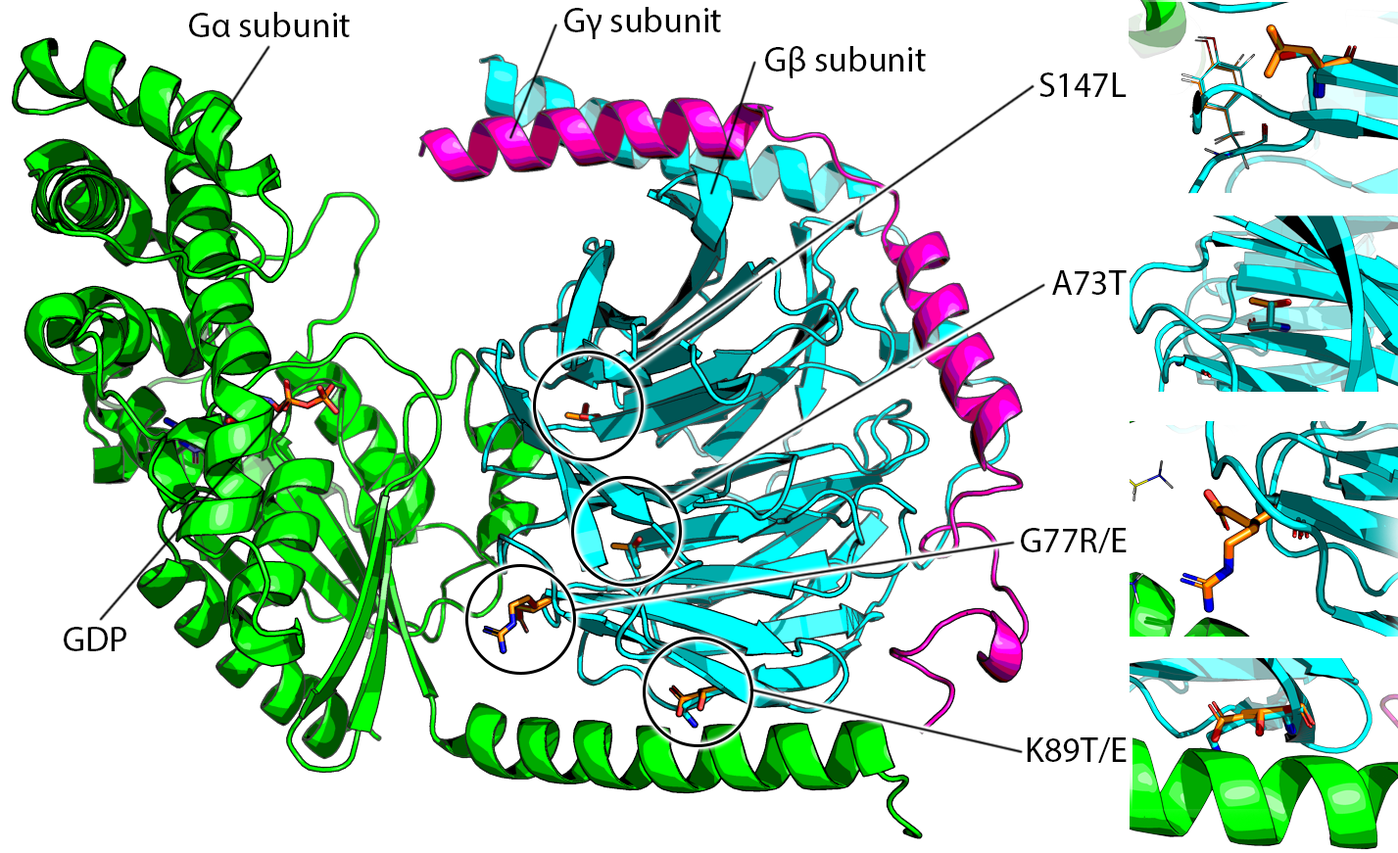
<style>
.page{position:relative;width:1398px;height:853px;background:#ffffff}
.page>*{position:absolute;margin:0}
.t1{font:35.3px "MyriadPro-Regular";color:#000000}
</style>
<div class="page">
<p class="t1" style="left:189px;top:12px;width:161px;height:25px">Gα subunit</p>
<p class="t1" style="left:564px;top:7px;width:157px;height:32px">Gγ subunit</p>
<p class="t1" style="left:765px;top:46px;width:161px;height:32px">Gβ subunit</p>
<p class="t1" style="left:1039px;top:72px;width:87px;height:25px">S147L</p>
<p class="t1" style="left:1052px;top:270px;width:74px;height:25px">A73T</p>
<p class="t1" style="left:1021px;top:528px;width:105px;height:25px">G77R/E</p>
<p class="t1" style="left:64px;top:627px;width:62px;height:24px">GDP</p>
<p class="t1" style="left:1026px;top:738px;width:100px;height:25px">K89T/E</p>
</div>
